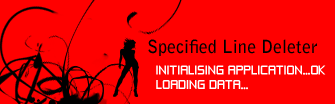
<style>
.page{position:relative;width:335px;height:104px;background:#ff0000}
.page>*{position:absolute;margin:0}
.t1{font:18px "BellGothicStd-Bold";color:#000000}
.t2{font:12px "ZeroThrees";color:#ffffff}
</style>
<div class="page">
<p class="t1" style="left:148px;top:39px;width:169px;height:17px">Specified Line Deleter</p>
<p class="t2" style="left:156px;top:65px;width:170px;height:25px">INITIALISING APPLICATION...OK<br>LOADING DATA...</p>
</div>
